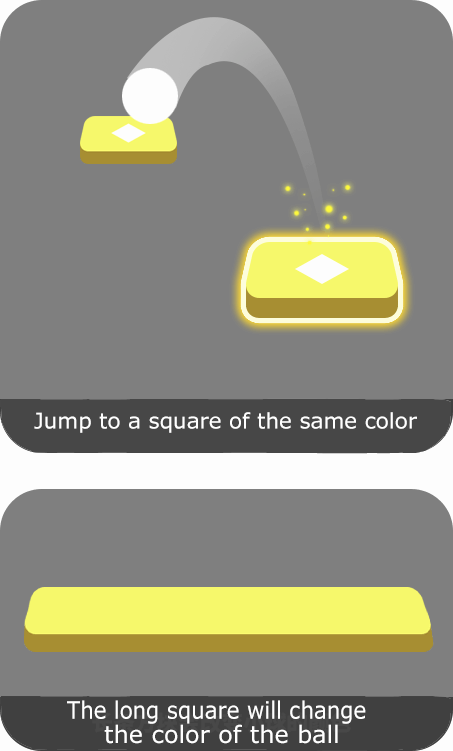
<style>
.page{position:relative;width:453px;height:751px;background:#7f7f7f}
.page>*{position:absolute;margin:0}
.t1{font:21.4px "Verdana";color:#ffffff}
.t2{font:24px "Verdana";color:#ffffff;scale:0.89 1}
.t3{font:24px "Verdana";color:#ffffff}
</style>
<div class="page">
<p class="t1" style="left:34px;top:412px;width:383px;height:21px">Jump to a square of the same color</p>
<p class="t2" style="left:67px;top:700px;width:299px;height:24px">The long square will change</p>
<p class="t3" style="left:104px;top:724px;width:234px;height:20px">the color of the ball</p>
</div>
